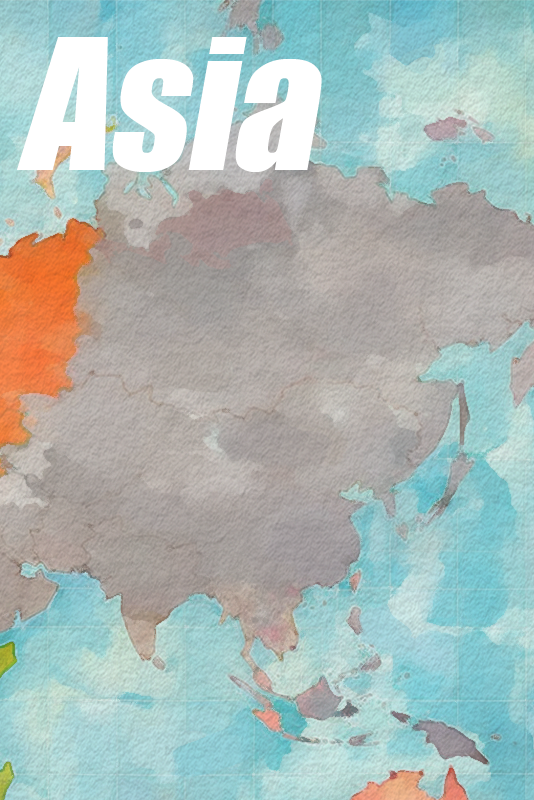
<style>
.page{position:relative;width:534px;height:800px}
.page>*{position:absolute;margin:0}
.t1{font:167.8px "Impact";color:#ffffff;font-style:italic}
</style>
<div class="page">
<p class="t1" style="left:17px;top:37px;width:305px;height:135px">Asia</p>
</div>
